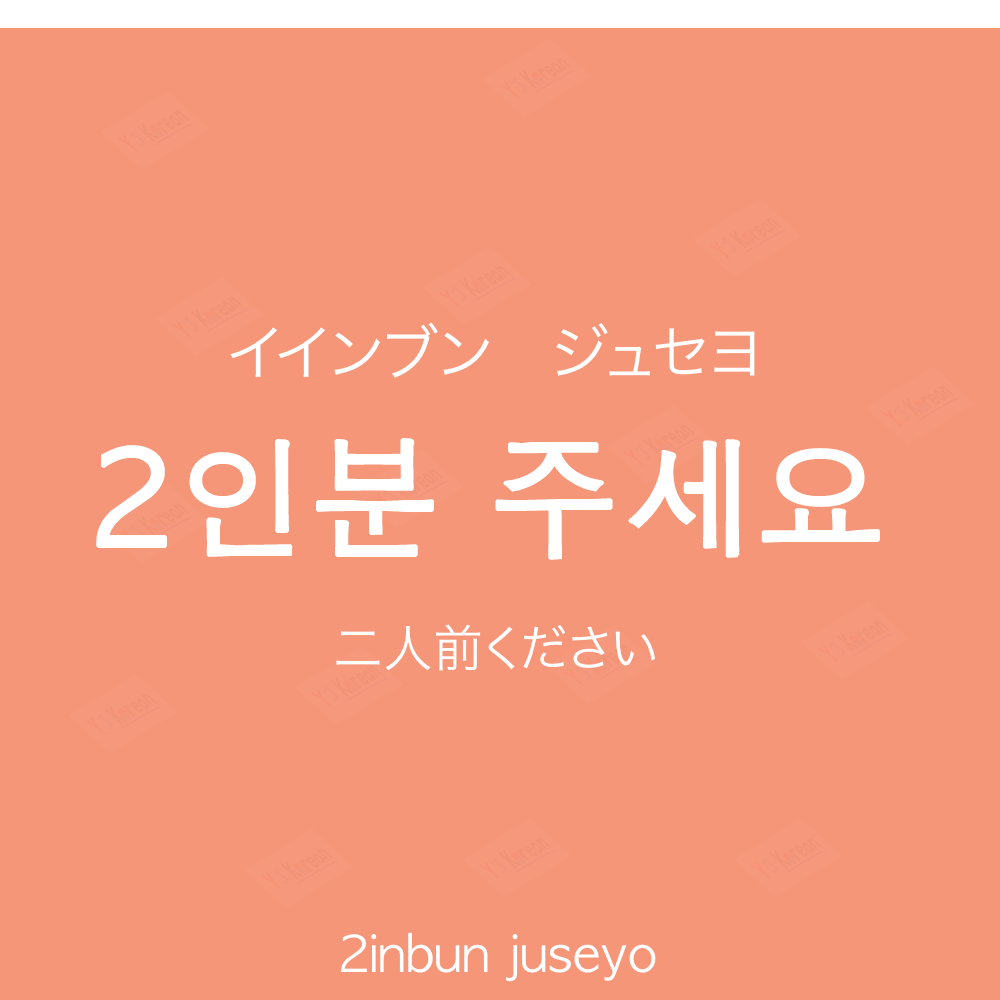
<style>
.page{position:relative;width:1000px;height:1000px;background:#f69679}
.page>*{position:absolute;margin:0}
.t1{font:60px "HiraKakuProN-W3";color:#ffffff;text-transform:uppercase}
.t2{font:130px "AppleGothic";color:#ffffff;font-weight:bold}
.t3{font:50px "HiraKakuProN-W3";color:#ffffff}
.t4{font:50px "AppleGothic";color:#ffffff}
</style>
<div class="page">
<p class="t1" style="left:230px;top:322px;width:525px;height:56px">イインブン　ジュセヨ</p>
<p class="t2" style="left:96px;top:438px;width:784px;height:122px">2인분 주세요</p>
<p class="t3" style="left:336px;top:624px;width:319px;height:47px">二人前ください</p>
<p class="t4" style="left:341px;top:932px;width:315px;height:50px">2inbun juseyo</p>
</div>
